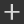
<style>
.page{position:relative;width:24px;height:24px;background:#333333}
.page>*{position:absolute;margin:0}
.t1{font:30px "Roboto-Light";letter-spacing:-0.025em;color:#d7d7d7}
</style>
<div class="page">
<p class="t1" style="left:4px;top:4px;width:16px;height:16px">+</p>
</div>
